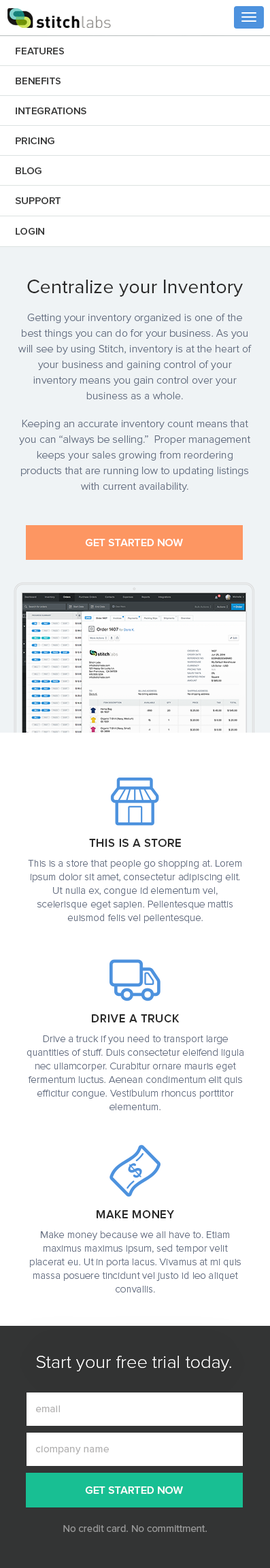
<style>
.page{position:relative;width:270px;height:1568px;background:#ffffff}
.page>*{position:absolute;margin:0}
.t1{font:10.2px "ProximaNova-Semibold";color:#333434;text-transform:uppercase}
.t2{font:10.2px "ProximaNova-Semibold";color:#333434}
.t3{font:10.9px/15.6px "ProximaNova-Light";color:#656f82}
.t4{font:19.7px/34px "ProximaNova-Regular";color:#292929}
.t5{font:10.9px "ProximaNova-Semibold";color:#ffffff;text-transform:uppercase}
.t6{font:10.2px/13.6px "ProximaNova-Light";color:#656f82}
.t7{font:11.6px/30.7px "ProximaNova-Semibold";letter-spacing:0.03em;color:#292929;text-transform:uppercase}
.t8{font:18.4px "ProximaNova-Light";color:#ffffff}
.t9{font:10.1px "ProximaNova-Regular";letter-spacing:0.02em;color:#afaeae}
.t10{font:10.2px "ProximaNova-Regular";color:#9a9a9a}
</style>
<div class="page">
<p class="t1" style="left:16px;top:48px;width:48px;height:6px">Features</p>
<p class="t2" style="left:16px;top:78px;width:45px;height:6px">BENEFITS</p>
<p class="t2" style="left:16px;top:107px;width:70px;height:7px">INTEGRATIONS</p>
<p class="t2" style="left:16px;top:137px;width:38px;height:7px">PRICING</p>
<p class="t2" style="left:16px;top:167px;width:25px;height:7px">BLOG</p>
<p class="t2" style="left:15px;top:197px;width:46px;height:7px">SUPPORT</p>
<p class="t2" style="left:16px;top:228px;width:28px;height:7px">LOGIN</p>
<p class="t3" style="left:18px;top:280px;width:234px;height:212px;text-align:center"><span class="t4">Centralize your Inventory<br></span>Getting your inventory organized is one of the best things you can do for your business. As you will see by using Stitch, inventory is at the heart of your business and gaining control of your inventory means you gain control over your business as a whole. <br>Keeping an accurate inventory count means that you can “always be selling.”  Proper management keeps your sales growing from reordering products that are running low to updating listings with current availability.</p>
<p class="t5" style="left:85px;top:539px;width:98px;height:7px">Get Started Now</p>
<p class="t6" style="left:28px;top:839px;width:213px;height:84px;text-align:center"><span class="t7">This is a store<br></span>This is a store that people go shopping at. Lorem ipsum dolor sit amet, consectetur adipiscing elit. Ut nulla ex, congue id elementum vel, scelerisque eget sapien. Pellentesque mattis euismod felis vel pellentesque.</p>
<p class="t6" style="left:27px;top:1014px;width:217px;height:96px;text-align:center"><span class="t7">Drive a truck<br></span>Drive a truck if you need to transport large quantities of stuff. Duis consectetur eleifend ligula nec ullamcorper. Curabitur ornare mauris eget fermentum luctus. Aenean condimentum elit quis efficitur congue. Vestibulum rhoncus porttitor elementum.</p>
<p class="t6" style="left:30px;top:1210px;width:211px;height:82px;text-align:center"><span class="t7">Make Money<br></span>Make money because we all have to. Etiam maximus maximus ipsum, sed tempor velit placerat eu. Ut in porta lacus. Vivamus at mi quis massa posuere tincidunt vel justo id leo aliquet convallis.</p>
<p class="t8" style="left:36px;top:1356px;width:195px;height:15px">Start your free trial today.</p>
<p class="t9" style="left:36px;top:1405px;width:24px;height:7px">email</p>
<p class="t9" style="left:36px;top:1446px;width:73px;height:8px">ciompany name</p>
<p class="t5" style="left:85px;top:1486px;width:98px;height:8px">Get Started Now</p>
<p class="t10" style="left:63px;top:1524px;width:144px;height:8px">No credit card. No committment.</p>
</div>
